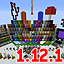
<style>
.page{position:relative;width:64px;height:64px}
.page>*{position:absolute;margin:0}
.t1{font:20px "ConduitITCW01-Bold";color:#ff0000}
</style>
<div class="page">
<p class="t1" style="left:16px;top:48px;width:47px;height:14px">1.12.1</p>
</div>
